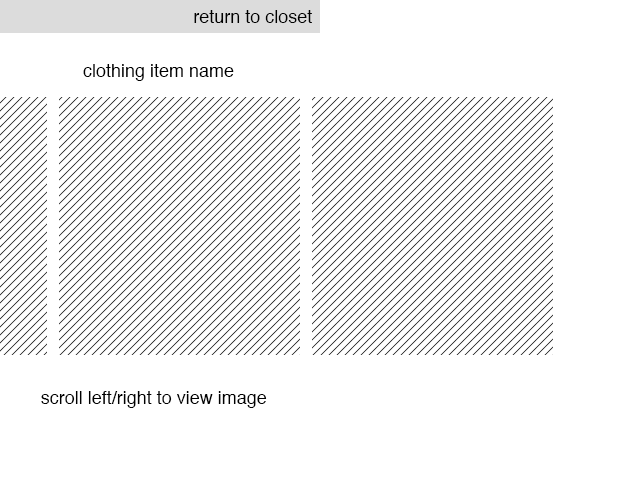
<style>
.page{position:relative;width:640px;height:480px;background:#ffffff}
.page>*{position:absolute;margin:0}
.t1{font:18px "Helvetica";color:#000000}
</style>
<div class="page">
<p class="t1" style="left:194px;top:10px;width:118px;height:13px">return to closet</p>
<p class="t1" style="left:83px;top:64px;width:151px;height:17px">clothing item name</p>
<p class="t1" style="left:41px;top:391px;width:226px;height:17px">scroll left/right to view image</p>
</div>
